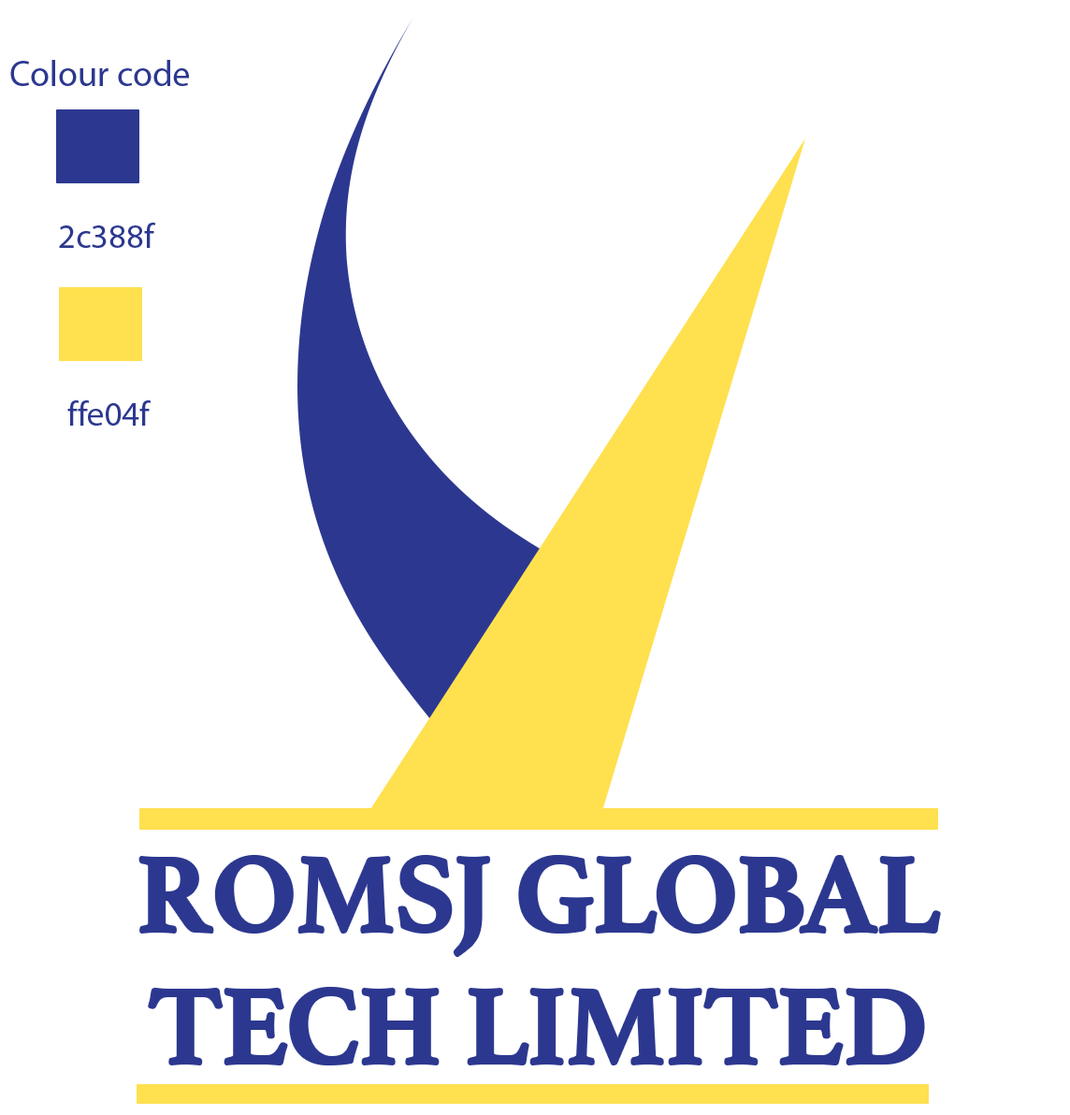
<style>
.page{position:relative;width:1070px;height:1115px;background:#ffffff}
.page>*{position:absolute;margin:0}
.t1{font:36.2px "MyriadPro-Regular";color:#2c388f}
.t2{font:34.6px "MyriadPro-Regular";color:#2c388f}
.t3{font:111px "Athelas-Bold";color:#2c388f}
</style>
<div class="page">
<p class="t1" style="left:10px;top:60px;width:179px;height:26px">Colour code</p>
<p class="t2" style="left:59px;top:223px;width:97px;height:25px">2c388f</p>
<p class="t2" style="left:67px;top:400px;width:84px;height:25px">ffe04f</p>
<p class="t3" style="left:140px;top:857px;width:799px;height:206px;text-align:center">ROMSJ GLOBAL<br>TECH LIMITED</p>
</div>
